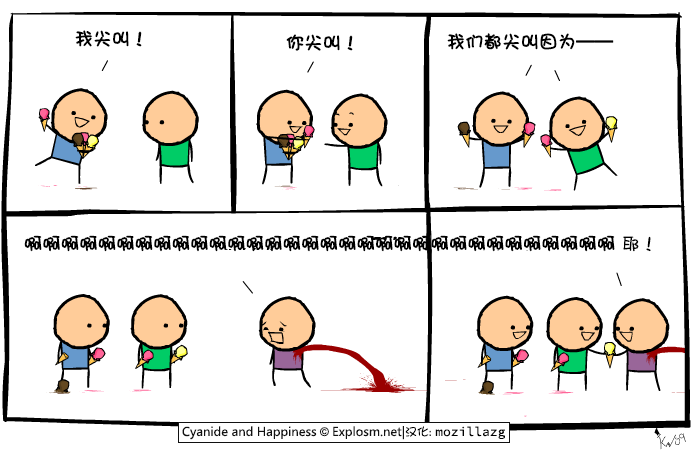
<style>
.page{position:relative;width:692px;height:450px;background:#ffffff}
.page>*{position:absolute;margin:0}
.t1{font:18px "DFGirl";color:#000000;font-weight:bold}
.t2{font:18px "DFGirl";color:#000000}
</style>
<div class="page">
<p class="t1" style="left:75px;top:30px;width:67px;height:17px">我尖叫！</p>
<p class="t1" style="left:286px;top:34px;width:67px;height:17px">你尖叫！</p>
<p class="t1" style="left:447px;top:33px;width:167px;height:17px">我们都尖叫因为——</p>
<p class="t1" style="left:24px;top:235px;width:627px;height:17px">啊啊啊啊啊啊啊啊啊啊啊啊啊啊啊啊啊啊啊啊啊啊啊啊啊啊啊啊啊啊啊啊 <span class="t2">耶！</span></p>
</div>
